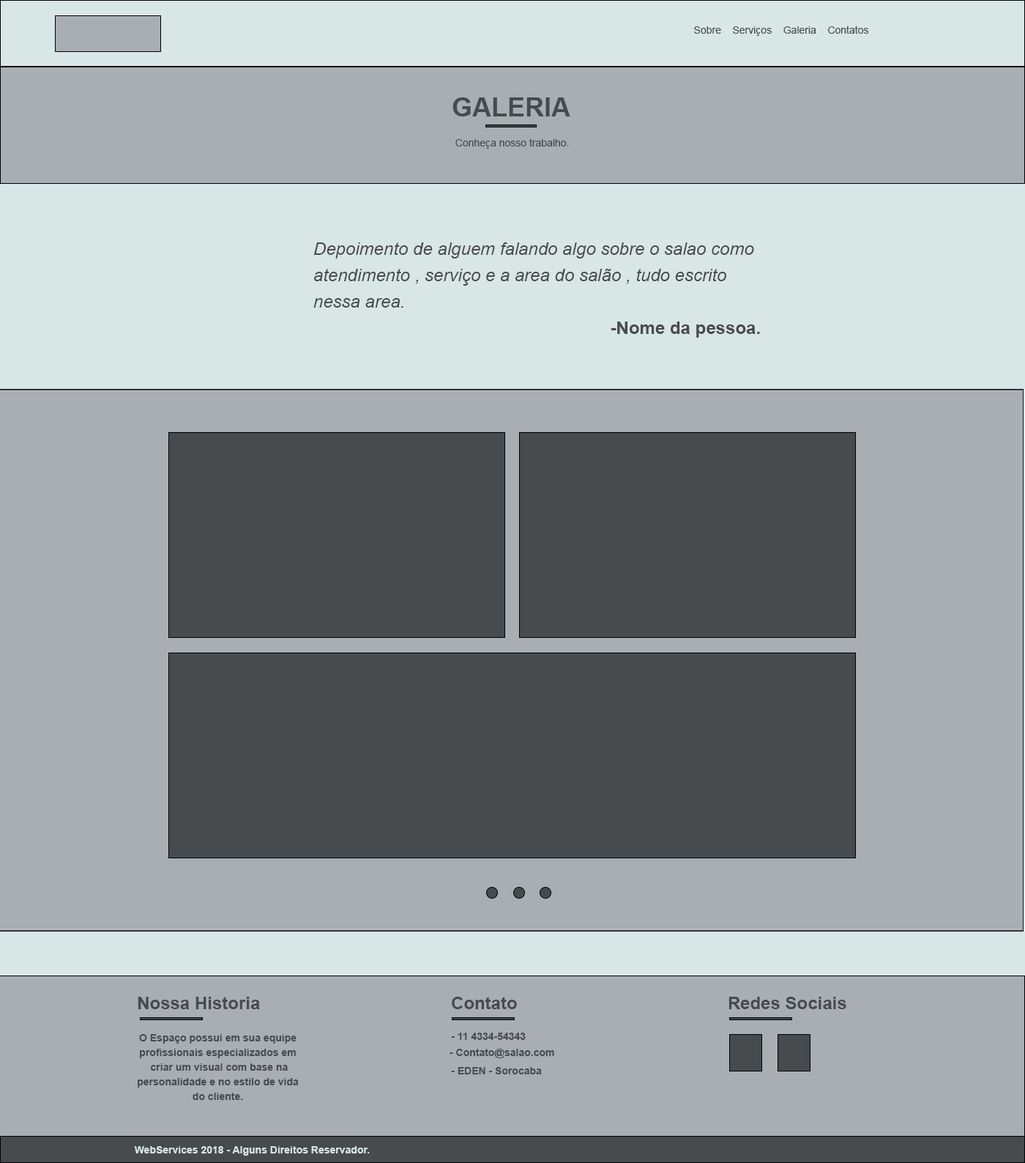
<style>
.page{position:relative;width:1025px;height:1163px;background:#a9aeb3}
.page>*{position:absolute;margin:0}
.t1{font:10.3px "ArialMT";color:#484b4d}
.t2{font:26.4px "Arial-BoldMT";color:#484b4d;text-transform:uppercase}
.t3{font:17.6px/26.4px "Arial-ItalicMT";color:#484b4d}
.t4{font:17.6px/26.4px "Arial-BoldMT";color:#484b4d}
.t5{font:17.5px "Arial-BoldMT";color:#484b4d}
.t6{font:10.2px/14.6px "Arial-BoldMT";color:#484b4d}
.t7{font:10.3px "Arial-BoldMT";color:#484b4d}
.t8{font:10.3px "Arial-BoldMT";color:#d9e6e6}
</style>
<div class="page">
<p class="t1" style="left:694px;top:26px;width:175px;height:10px">Sobre    Serviços    Galeria    Contatos</p>
<p class="t2" style="left:453px;top:97px;width:118px;height:19px">Galeria</p>
<p class="t1" style="left:456px;top:138px;width:113px;height:11px">Conheça nosso trabalho.</p>
<p class="t3" style="left:313px;top:242px;width:447px;height:96px">Depoimento de alguem falando algo sobre o salao como atendimento , serviço e a area do salão , tudo escrito nessa area.<br><span class="t4">-Nome da pessoa.</span></p>
<p class="t5" style="left:138px;top:997px;width:122px;height:12px">Nossa Historia</p>
<p class="t5" style="left:452px;top:997px;width:65px;height:12px">Contato</p>
<p class="t5" style="left:729px;top:997px;width:118px;height:12px">Redes Sociais</p>
<p class="t6" style="left:138px;top:1034px;width:161px;height:66px;text-align:center">O Espaço possui em sua equipe profissionais especializados em<br> criar um visual com base na personalidade e no estilo de vida <br>do cliente.</p>
<p class="t7" style="left:451px;top:1033px;width:75px;height:7px">- 11 4334-54343</p>
<p class="t7" style="left:450px;top:1049px;width:104px;height:9px">- Contato@salao.com</p>
<p class="t7" style="left:451px;top:1067px;width:91px;height:7px">- EDEN - Sorocaba</p>
<p class="t8" style="left:134px;top:1146px;width:236px;height:10px">WebServices 2018 - Alguns Direitos Reservador.</p>
</div>
